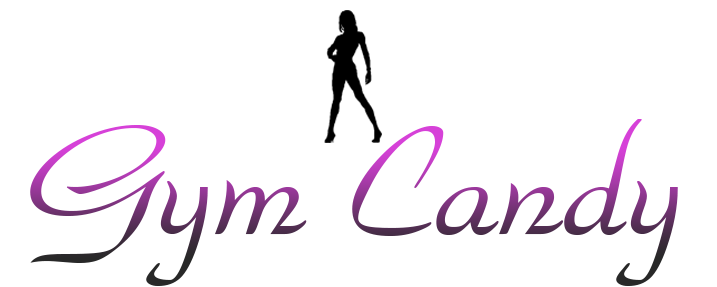
<style>
.page{position:relative;width:717px;height:287px;background:#ffffff}
.page>*{position:absolute;margin:0}
.t1{font:163px "ParkAvenueBT-Regular"}
</style>
<div class="page">
<p class="t1" style="left:30px;top:119px;width:648px;height:167px">Gym Candy</p>
</div>
